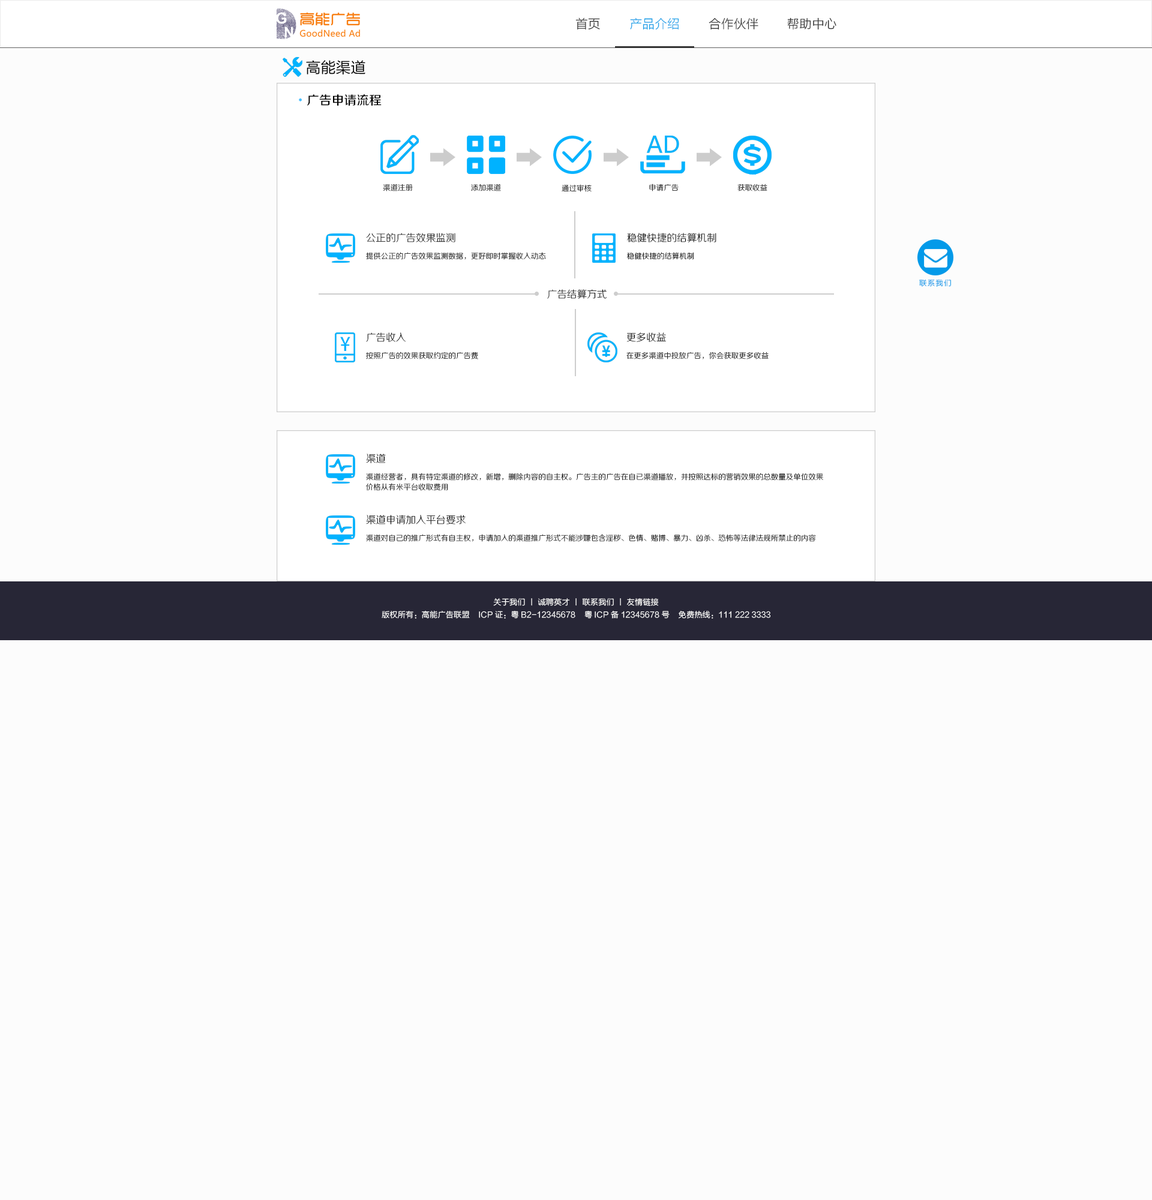
<style>
.page{position:relative;width:1152px;height:1200px;background:#fcfcfc}
.page>*{position:absolute;margin:0}
.t1{font:12.5px "FZLTXHK";color:#333333}
.t2{font:12.5px "FZLTXHK";color:#1ca2e9}
.t3{font:15px "FZLTHK--GBK1-0";color:#000000}
.t4{font:12.5px "FZZZHUNHJW--GB1-0";color:#000000}
.t5{font:12.5px "AdobeHeitiStd-Regular";color:#47c0ff}
.t6{font:7.5px "FZZXHJW--GB1-0"}
.t7{font:7.5px "FZZXHJW--GB1-0";color:#010101}
.t8{font:10px "FZZXHJW--GB1-0";color:#000000}
.t9{font:7.5px "FZZXHJW--GB1-0";color:#000000}
.t10{font:7.5px "FZLTXHK";letter-spacing:0.1em;color:#039ae9}
.t11{font:18.6px "AdobeHeitiStd-Regular";color:#00b2ff}
.t12{font:7.5px/10px "FZZXHJW--GB1-0";color:#000000}
.t13{font:8px "FZLTXHK";color:#ffffff}
</style>
<div class="page">
<p class="t1" style="left:575px;top:17px;width:25px;height:13px">首页</p>
<p class="t1" style="left:709px;top:17px;width:49px;height:13px">合作伙伴</p>
<p class="t1" style="left:787px;top:17px;width:49px;height:13px">帮助中心</p>
<p class="t2" style="left:630px;top:18px;width:49px;height:12px">产品介绍</p>
<p class="t3" style="left:306px;top:60px;width:59px;height:15px">高能渠道</p>
<p class="t4" style="left:299px;top:94px;width:83px;height:12px"><span class="t5">•</span>广告申请流程</p>
<p class="t6" style="left:383px;top:184px;width:30px;height:7px">渠道注册</p>
<p class="t7" style="left:471px;top:184px;width:30px;height:7px">添加渠道</p>
<p class="t6" style="left:562px;top:184px;width:30px;height:8px">通过审核</p>
<p class="t6" style="left:649px;top:184px;width:30px;height:7px">申请广告</p>
<p class="t7" style="left:737px;top:184px;width:30px;height:7px">获取收益</p>
<p class="t8" style="left:366px;top:233px;width:89px;height:9px">公正的广告效果监测</p>
<p class="t8" style="left:627px;top:233px;width:89px;height:9px">稳健快捷的结算机制</p>
<p class="t9" style="left:366px;top:252px;width:180px;height:8px">提供公正的广告效果监测数据，更好即时掌握收入动态</p>
<p class="t9" style="left:627px;top:252px;width:67px;height:8px">稳健快捷的结算机制</p>
<p class="t10" style="left:919px;top:279px;width:32px;height:8px">联系我们</p>
<p class="t8" style="left:547px;top:289px;width:60px;height:10px">广告结算方式</p>
<p class="t11" style="left:340px;top:337px;width:10px;height:14px">¥</p>
<p class="t8" style="left:366px;top:332px;width:40px;height:10px">广告收入</p>
<p class="t8" style="left:626px;top:332px;width:40px;height:10px">更多收益</p>
<p class="t6" style="left:366px;top:352px;width:112px;height:7px">按照广告的效果获取约定的广告费</p>
<p class="t9" style="left:626px;top:352px;width:143px;height:7px">在更多渠道中投放广告，你会获取更多收益</p>
<p class="t8" style="left:366px;top:454px;width:20px;height:9px">渠道</p>
<p class="t12" style="left:365px;top:473px;width:458px;height:18px">渠道经营者，具有特定渠道的修改，新增，删除内容的自主权。广告主的广告在自已渠道播放，并按照达标的营销效果的总数量及单位效果<br>价格从有米平台收取费用</p>
<p class="t8" style="left:366px;top:515px;width:100px;height:9px">渠道申请加入平台要求</p>
<p class="t9" style="left:366px;top:534px;width:450px;height:8px">渠道对自己的推广形式有自主权，申请加入的渠道推广形式不能涉嫌包含淫秽、色情、赌博、暴力、凶杀、恐怖等法律法规所禁止的内容</p>
<p class="t13" style="left:493px;top:598px;width:166px;height:8px">关于我们 丨 诚聘英才 丨 联系我们 丨 友情链接</p>
<p class="t13" style="left:382px;top:610px;width:389px;height:9px">版权所有：高能广告联盟    ICP证：粤B2-12345678    粤ICP备12345678号    免费热线：111 222 3333</p>
</div>
